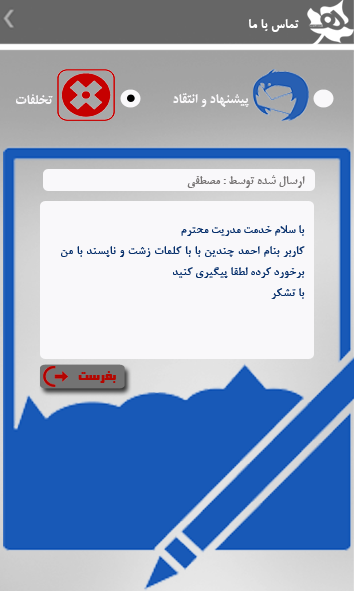
<style>
.page{position:relative;width:354px;height:591px;background:#1859b7}
.page>*{position:absolute;margin:0}
.t1{font:14.6px "BRoyaBold";color:#ffffff}
.t2{font:14.6px "BMitraBold";color:#f9f8fa}
.t3{font:12.5px "BMitraBold";color:#777474}
.t4{font:12.5px/20.8px "BNazaninBold";color:#062f6b}
.t5{font:12.5px "BSinaBold";color:#b50600}
</style>
<div class="page">
<p class="t1" style="left:249px;top:19px;width:50px;height:13px">تماس با ما</p>
<p class="t2" style="left:16px;top:94px;width:37px;height:10px">تخلفات</p>
<p class="t2" style="left:173px;top:93px;width:76px;height:14px">پيشنهاد و انتقاد</p>
<p class="t3" style="left:187px;top:175px;width:118px;height:13px">ارسال شده توسط : مصطفي</p>
<p class="t4" style="left:61px;top:225px;width:244px;height:74px;text-align:justify">با سلام خدمت مدريت محترم<br>کاربر بنام احمد چندين با با کلمات زشت و ناپسند با من برخورد کرده لطفا پيگيري کنيد<br>با تشکر</p>
<p class="t5" style="left:78px;top:371px;width:38px;height:12px">بفرست</p>
</div>
